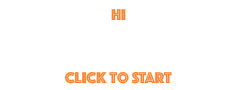
<style>
.page{position:relative;width:236px;height:90px;background:#ffffff}
.page>*{position:absolute;margin:0}
.t1{font:16px "Phosphate-Inline";color:#ff822e}
</style>
<div class="page">
<p class="t1" style="left:111px;top:9px;width:15px;height:12px">HI</p>
<p class="t1" style="left:64px;top:71px;width:108px;height:13px">Click to START</p>
</div>
